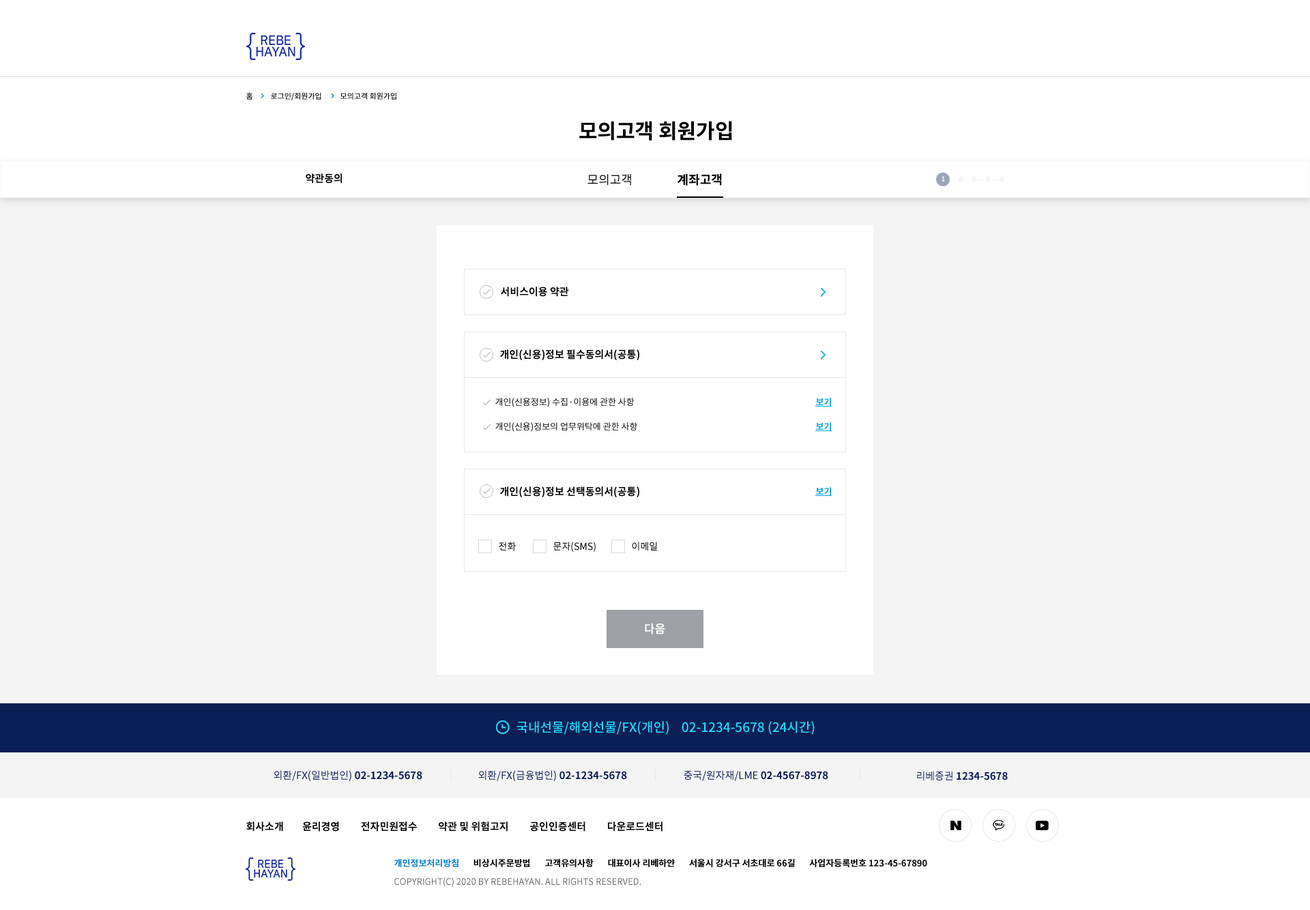
<style>
.page{position:relative;width:1310px;height:910px;background:#ffffff}
.page>*{position:absolute;margin:0}
.t1{font:7.5px "NotoSansKR-Medium";color:#000000}
.t2{font:20.5px "NotoSansKR-Bold";color:#000000}
.t3{font:10.2px "NotoSansKR-Bold";color:#000000}
.t4{font:12.3px "NotoSansKR-Regular";color:#000000}
.t5{font:12.3px "NotoSansKR-Bold";color:#000000}
.t6{font:6.8px "NotoSansKR-Bold";color:#f4f5f5}
.t7{font:8.9px "NotoSansKR-Regular";color:#000000}
.t8{font:8.9px "NotoSansKR-Bold";color:#02a2e8}
.t9{font:9.6px "NotoSansKR-Regular";color:#000000}
.t10{font:11.6px "NotoSansKR-Bold";color:#fefefe}
.t11{font:13px "NotoSansKR-Medium";color:#1dddfd}
.t12{font:10.2px "NotoSansKR-Bold";color:#081b50}
.t13{font:10.2px "NotoSansKR-Regular";color:#081b50}
.t14{font:8.9px "NotoSansKR-Bold";color:#000000}
.t15{font:8.9px "NotoSansKR-Bold";color:#067fd9}
.t16{font:8.9px "NotoSansKR-Regular";color:#66666a}
</style>
<div class="page">
<p class="t1" style="left:246px;top:92px;width:6px;height:8px">홈</p>
<p class="t1" style="left:271px;top:92px;width:50px;height:8px">로그인/회원가입</p>
<p class="t1" style="left:340px;top:92px;width:56px;height:8px">모의고객 회원가입</p>
<p class="t2" style="left:579px;top:121px;width:153px;height:20px">모의고객 회원가입</p>
<p class="t3" style="left:306px;top:173px;width:36px;height:11px">약관동의</p>
<p class="t4" style="left:587px;top:174px;width:44px;height:12px">모의고객</p>
<p class="t5" style="left:678px;top:173px;width:44px;height:13px">계좌고객</p>
<p class="t6" style="left:942px;top:176px;width:3px;height:5px">1</p>
<p class="t3" style="left:501px;top:287px;width:68px;height:10px">서비스이용 약관</p>
<p class="t3" style="left:500px;top:349px;width:139px;height:11px">개인(신용)정보 필수동의서(공통)</p>
<p class="t7" style="left:495px;top:398px;width:140px;height:9px">개인(신용정보) 수집·이용에 관한 사항</p>
<p class="t8" style="left:816px;top:398px;width:15px;height:8px">보기</p>
<p class="t7" style="left:495px;top:422px;width:142px;height:10px">개인(신용)정보의 업무위탁에 관한 사항</p>
<p class="t8" style="left:816px;top:422px;width:15px;height:9px">보기</p>
<p class="t3" style="left:500px;top:486px;width:139px;height:11px">개인(신용)정보 선택동의서(공통)</p>
<p class="t8" style="left:816px;top:487px;width:15px;height:8px">보기</p>
<p class="t9" style="left:499px;top:542px;width:17px;height:9px">전화</p>
<p class="t9" style="left:553px;top:542px;width:43px;height:10px">문자(SMS)</p>
<p class="t9" style="left:632px;top:542px;width:25px;height:9px">이메일</p>
<p class="t10" style="left:645px;top:623px;width:20px;height:12px">다음</p>
<p class="t11" style="left:517px;top:721px;width:298px;height:14px">국내선물/해외선물/FX(개인)    02-1234-5678 (24시간)</p>
<p class="t12" style="left:274px;top:770px;width:148px;height:11px"><span class="t13">외환/FX(일반법인) </span>02-1234-5678</p>
<p class="t12" style="left:478px;top:770px;width:149px;height:11px"><span class="t13">외환/FX(금융법인) </span>02-1234-5678</p>
<p class="t12" style="left:684px;top:770px;width:144px;height:11px"><span class="t13">중국/원자재/LME </span>02-4567-8978</p>
<p class="t12" style="left:917px;top:771px;width:91px;height:10px"><span class="t13">리베증권 </span>1234-5678</p>
<p class="t3" style="left:246px;top:822px;width:417px;height:10px">회사소개        윤리경영         전자민원접수         약관 및 위험고지         공인인증센터         다운로드센터</p>
<p class="t14" style="left:394px;top:859px;width:533px;height:9px"><span class="t15">개인정보처리방침</span>       비상시주문방법       고객유의사항       대표이사 리베하얀       서울시 강서구 서초대로 66길       사업자등록번호 123-45-67890</p>
<p class="t16" style="left:394px;top:877px;width:247px;height:10px">COPYRIGHT(C) 2020 BY REBEHAYAN. ALL RIGHTS RESERVED.</p>
</div>
